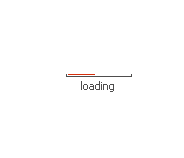
<style>
.page{position:relative;width:184px;height:158px;background:#ffffff}
.page>*{position:absolute;margin:0}
.t1{font:11px "Tahoma";color:#4e4d4d}
</style>
<div class="page">
<p class="t1" style="left:81px;top:81px;width:33px;height:11px">loading</p>
</div>
